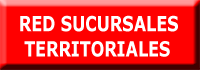
<style>
.page{position:relative;width:200px;height:70px;background:#ff0000}
.page>*{position:absolute;margin:0}
.t1{font:21px "Verdana-Bold";color:#ffffff;scale:0.76 1}
</style>
<div class="page">
<p class="t1" style="left:20px;top:15px;width:158px;height:42px">RED SUCURSALES<br> TERRITORIALES</p>
</div>
